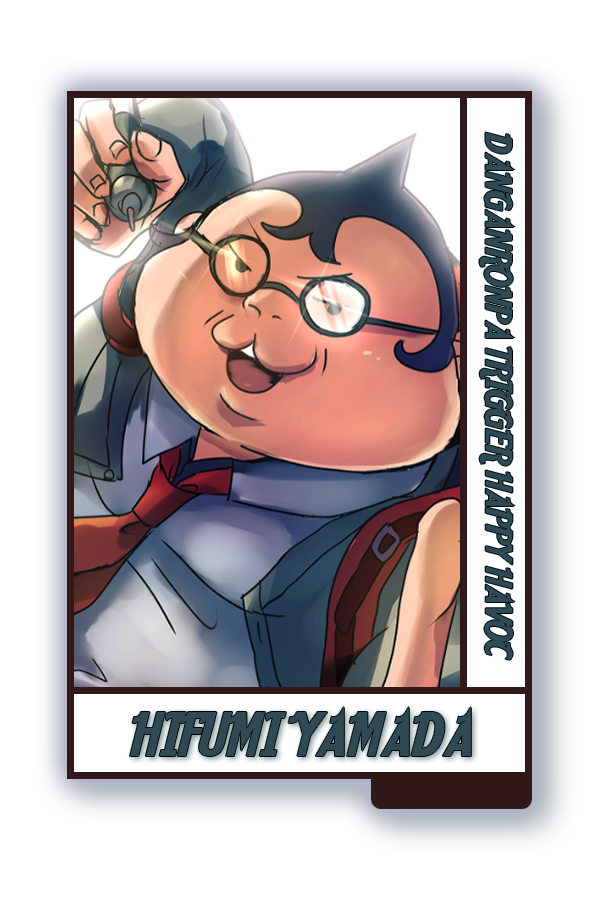
<style>
.page{position:relative;width:600px;height:900px;background:#ffffff}
.page>*{position:absolute;margin:0}
.t1{font:35.3px "AarvarkCafe";color:#383d48}
.t2{font:56px "AarvarkCafe";color:#383d48}
</style>
<div class="page">
<p class="t1" style="left:479px;top:132px;width:36px;height:528px;rotate:90deg">DANGANRONPA TRIGGER HAPPY HAVOC</p>
<p class="t2" style="left:130px;top:707px;width:341px;height:49px">HIFUMI YAMADA</p>
</div>
